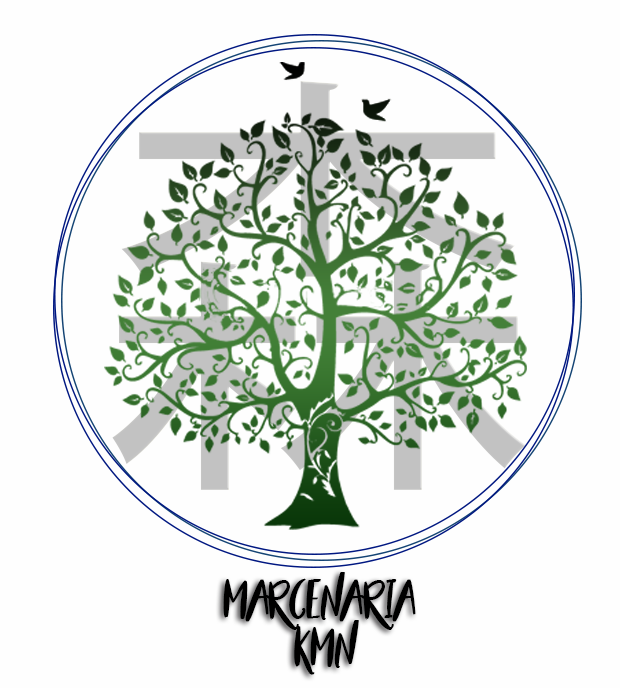
<style>
.page{position:relative;width:620px;height:688px;background:#fefefe}
.page>*{position:absolute;margin:0}
.t1{font:438.1px "KozGoPr6N-Regular"}
.t2{font:40px "BeautyandtheBeast";color:#000000}
</style>
<div class="page">
<p class="t1" style="left:112px;top:81px;width:414px;height:409px">森</p>
<p class="t2" style="left:223px;top:572px;width:193px;height:103px;text-align:center">Marcenaria <br>KMN</p>
</div>
